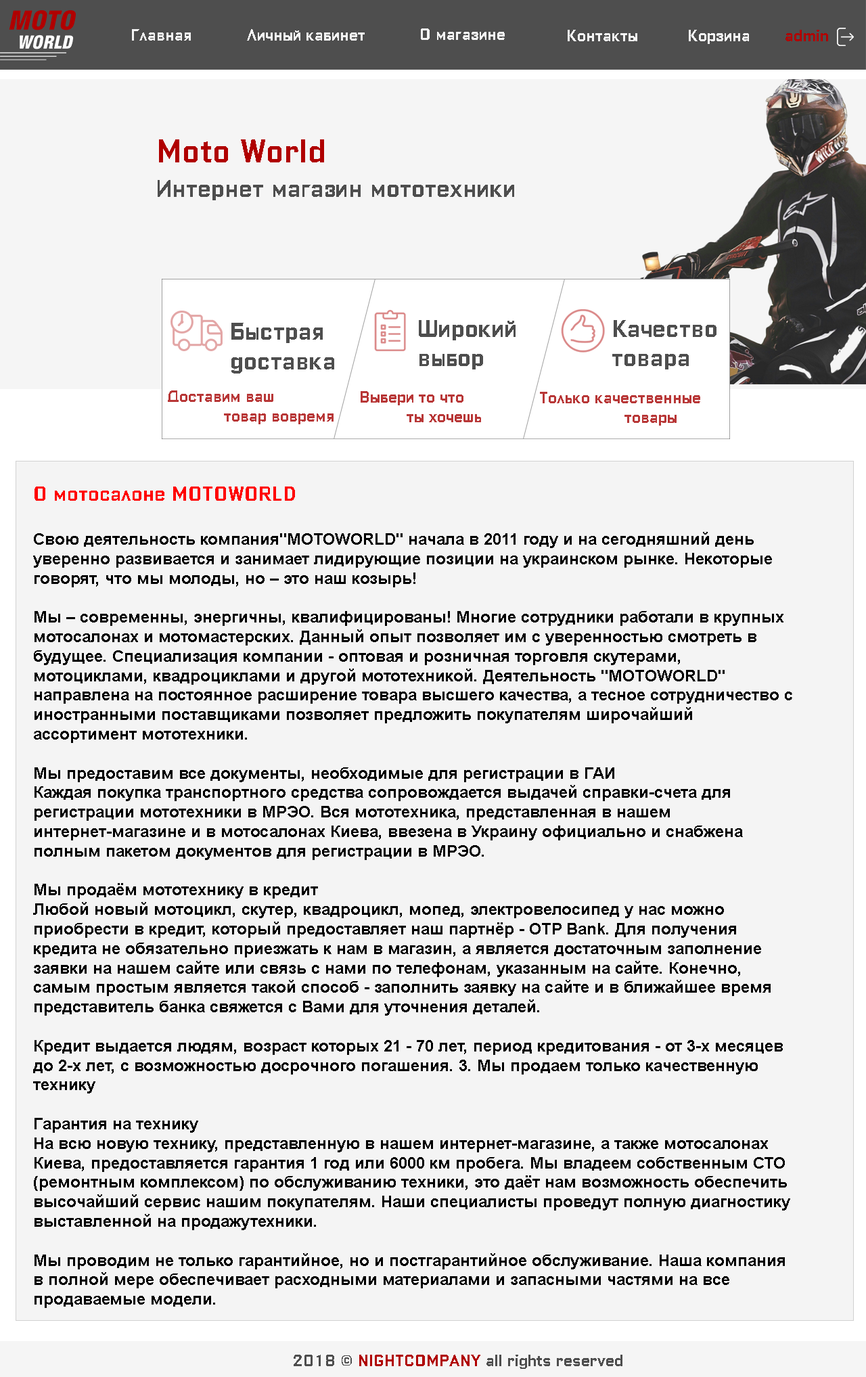
<style>
.page{position:relative;width:866px;height:1377px;background:#f4f4f4}
.page>*{position:absolute;margin:0}
.t1{font:16.2px "ColumbiaPrintCyrillic";color:#f4f4f4}
.t2{font:16.2px "ColumbiaPrintCyrillic";color:#b00000}
.t3{font:32.5px "ColumbiaPrintCyrillic";color:#b00000}
.t4{font:24.4px "ColumbiaPrintCyrillic";color:#4e4e4e}
.t5{font:24.3px "ColumbiaPrintCyrillic";color:#4e4e4e}
.t6{font:16.2px "ColumbiaPrintCyrillic";color:#b83737}
.t7{font:16.2px "Arial-BoldMT";color:#000000}
.t8{font:20.3px "ColumbiaPrintCyrillic";color:#ff0000}
.t9{font:16.2px "ColumbiaPrintCyrillic";color:#4e4e4e}
</style>
<div class="page">
<p class="t1" style="left:132px;top:29px;width:59px;height:12px">Главная</p>
<p class="t1" style="left:247px;top:29px;width:118px;height:12px">Личный кабинет</p>
<p class="t1" style="left:421px;top:28px;width:84px;height:12px">О магазине</p>
<p class="t1" style="left:568px;top:30px;width:69px;height:11px">Контакты</p>
<p class="t1" style="left:689px;top:30px;width:60px;height:14px">Корзина</p>
<p class="t2" style="left:786px;top:30px;width:42px;height:11px">admin</p>
<p class="t3" style="left:159px;top:139px;width:165px;height:23px">Moto World</p>
<p class="t4" style="left:158px;top:180px;width:356px;height:20px">Интернет магазин мототехники</p>
<p class="t5" style="left:231px;top:323px;width:103px;height:50px">Быстрая<br>доставка</p>
<p class="t5" style="left:419px;top:320px;width:97px;height:49px">Широкий <br>выбор</p>
<p class="t5" style="left:612px;top:320px;width:105px;height:49px">Качество товара</p>
<p class="t6" style="left:168px;top:390px;width:166px;height:34px">Доставим ваш <br>            товар вовремя</p>
<p class="t6" style="left:361px;top:391px;width:120px;height:31px">Выбери то что <br>          ты хочешь</p>
<p class="t6" style="left:540px;top:392px;width:160px;height:34px">Только качественные <br>                  товары</p>
<p class="t7" style="left:33px;top:486px;width:759px;height:822px"><span class="t8">О мотосалоне MOTOWORLD<br><br></span>Свою деятельность компания"MOTOWORLD" начала в 2011 году и на сегодняшний день уверенно развивается и занимает лидирующие позиции на украинском рынке. Некоторые говорят, что мы молоды, но – это наш козырь!<br><br>Мы – современны, энергичны, квалифицированы! Многие сотрудники работали в крупных мотосалонах и мотомастерских. Данный опыт позволяет им с уверенностью смотреть в будущее. Специализация компании - оптовая и розничная торговля скутерами, мотоциклами, квадроциклами и другой мототехникой. Деятельность "MOTOWORLD" направлена на постоянное расширение товара высшего качества, а тесное сотрудничество с иностранными поставщиками позволяет предложить покупателям широчайший ассортимент мототехники.<br><br>Мы предоставим все документы, необходимые для регистрации в ГАИ<br>Каждая покупка транспортного средства сопровождается выдачей справки-счета для регистрации мототехники в МРЭО. Вся мототехника, представленная в нашем интернет-магазине и в мотосалонах Киева, ввезена в Украину официально и снабжена полным пакетом документов для регистрации в МРЭО.<br><br>Мы продаём мототехнику в кредит<br>Любой новый мотоцикл, скутер, квадроцикл, мопед, электровелосипед у нас можно приобрести в кредит, который предоставляет наш партнёр - OTP Bank. Для получения кредита не обязательно приезжать к нам в магазин, а является достаточным заполнение заявки на нашем сайте или связь с нами по телефонам, указанным на сайте. Конечно, самым простым является такой способ - заполнить заявку на сайте и в ближайшее время представитель банка свяжется с Вами для уточнения деталей.<br><br>Кредит выдается людям, возраст которых 21 - 70 лет, период кредитования - от 3-х месяцев до 2-х лет, с возможностью досрочного погашения. 3. Мы продаем только качественную технику<br><br>Гарантия на технику<br>На всю новую технику, представленную в нашем интернет-магазине, а также мотосалонах Киева, предоставляется гарантия 1 год или 6000 км пробега. Мы владеем собственным СТО (ремонтным комплексом) по обслуживанию техники, это даёт нам возможность обеспечить высочайший сервис нашим покупателям. Наши специалисты проведут полную диагностику выставленной на продажутехники.<br><br>Мы проводим не только гарантийное, но и постгарантийное обслуживание. Наша компания в полной мере обеспечивает расходными материалами и запасными частями на все продаваемые модели.</p>
<p class="t9" style="left:294px;top:1355px;width:328px;height:14px">2018 © <span class="t2">NIGHTCOMPANY </span>all rights reserved</p>
</div>
